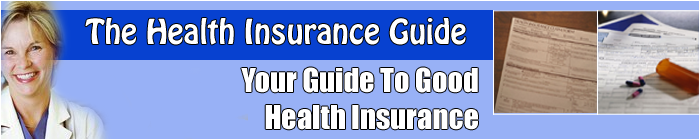
<style>
.page{position:relative;width:700px;height:140px;background:#98b1f6}
.page>*{position:absolute;margin:0}
.t1{font:30.5px "Hobo";color:#ffffff}
.t2{font:30.5px "Impact";color:#ffffff}
</style>
<div class="page">
<p class="t1" style="left:85px;top:18px;width:381px;height:27px">The Health Insurance Guide</p>
<p class="t2" style="left:241px;top:67px;width:237px;height:63px;text-align:right">Your Guide To Good<br>Health Insurance</p>
</div>
